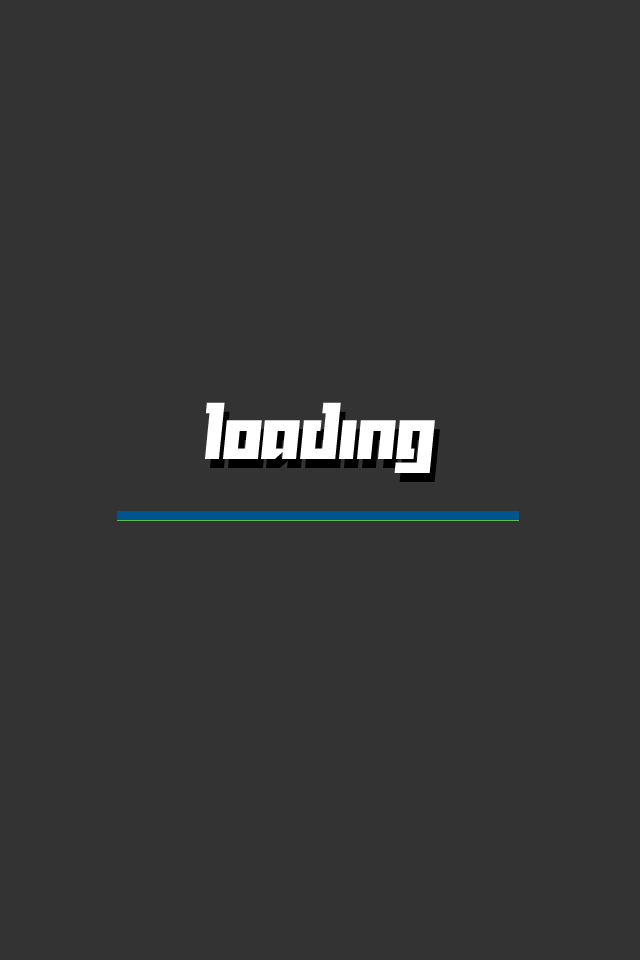
<style>
.page{position:relative;width:640px;height:960px;background:#333333}
.page>*{position:absolute;margin:0}
.t1{font:72px "Yukarimobile";color:#ffffff}
</style>
<div class="page">
<p class="t1" style="left:205px;top:402px;width:230px;height:71px">LOADING</p>
</div>
